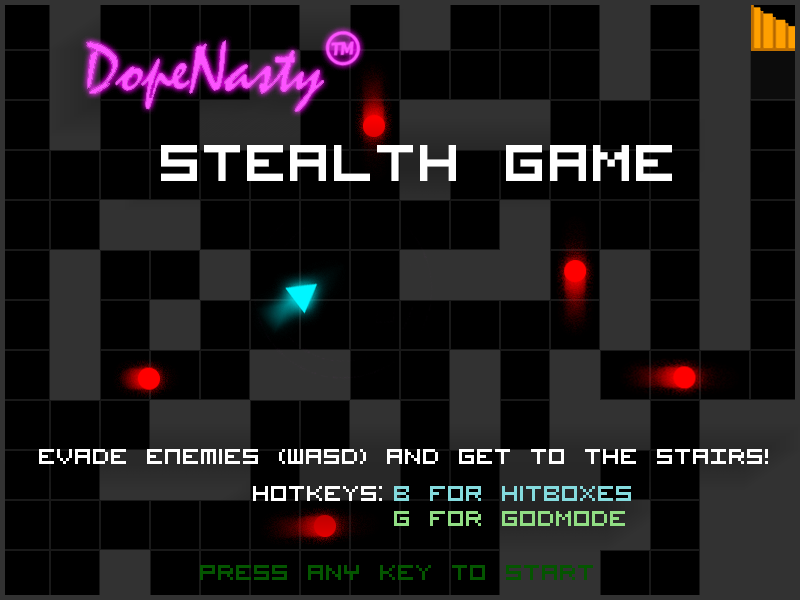
<style>
.page{position:relative;width:800px;height:600px;background:#000000}
.page>*{position:absolute;margin:0}
.t1{font:72px "VisitorTT1BRK";color:#ffffff}
.t2{font:30px "VisitorTT1BRK";color:#ffffff}
.t3{font:30px "VisitorTT1BRK";color:#84dbde}
.t4{font:30px "VisitorTT1BRK";color:#91de84}
.t5{font:30px "VisitorTT1BRK";color:#045500}
</style>
<div class="page">
<p class="t1" style="left:161px;top:145px;width:511px;height:36px">STealth GAME</p>
<p class="t2" style="left:39px;top:449px;width:729px;height:15px">eVADE enemies (wasd) AND GET TO THE STAIRS!</p>
<p class="t2" style="left:253px;top:486px;width:129px;height:15px">hotkeys:</p>
<p class="t3" style="left:394px;top:486px;width:237px;height:15px">b for hitboxes</p>
<p class="t4" style="left:394px;top:511px;width:231px;height:15px">G FOR GODMODE</p>
<p class="t5" style="left:200px;top:565px;width:393px;height:15px">pRESS aNY key TO START</p>
</div>
